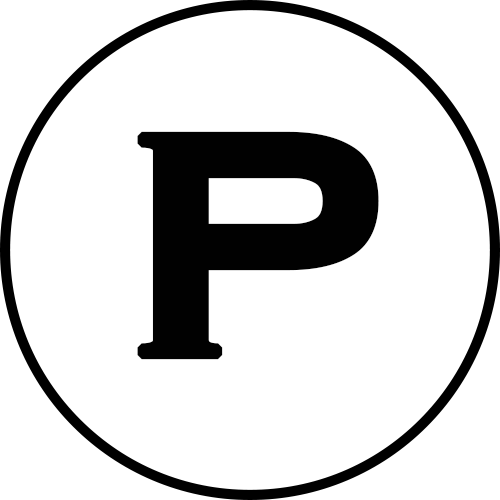
<style>
.page{position:relative;width:500px;height:500px;background:#ffffff}
.page>*{position:absolute;margin:0}
.t1{font:416.6px "Copperplate";color:#010101;text-transform:uppercase;font-weight:bold}
</style>
<div class="page">
<p class="t1" style="left:137px;top:131px;width:242px;height:229px">p</p>
</div>
